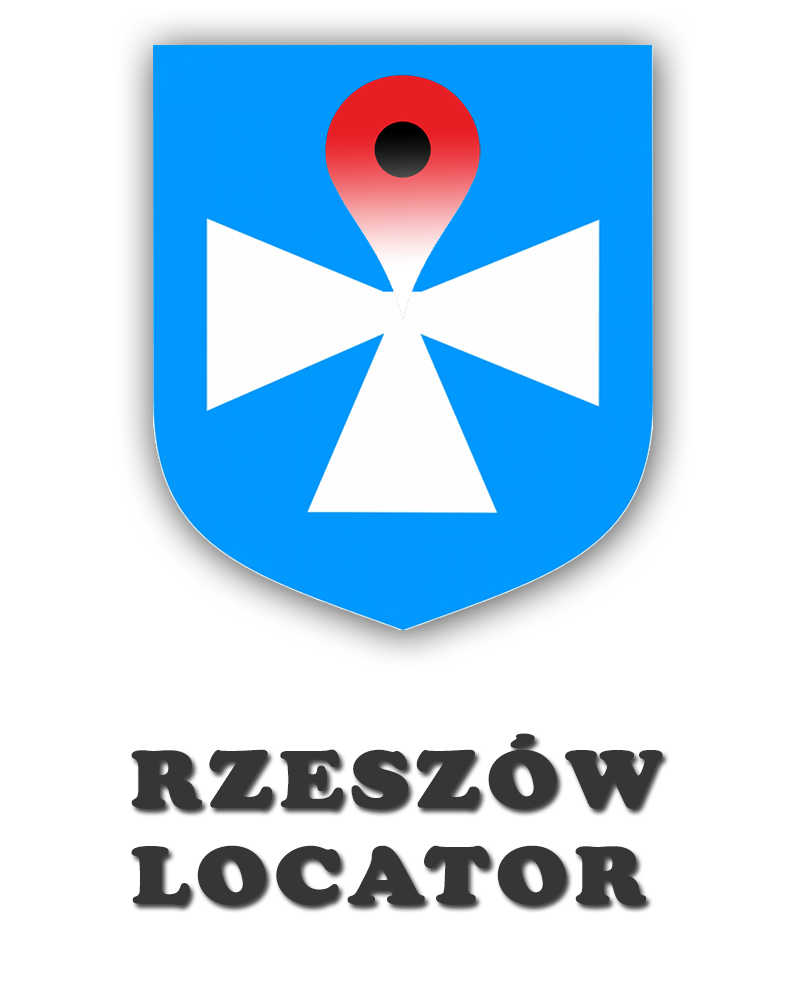
<style>
.page{position:relative;width:800px;height:1000px;background:#ffffff}
.page>*{position:absolute;margin:0}
.t1{font:80px "CooperBlackStd";letter-spacing:0.05em;color:#363636;text-transform:uppercase;font-weight:bold;scale:1.1 1}
</style>
<div class="page">
<p class="t1" style="left:131px;top:733px;width:532px;height:173px">RzESzów<br>LOCATOR</p>
</div>
